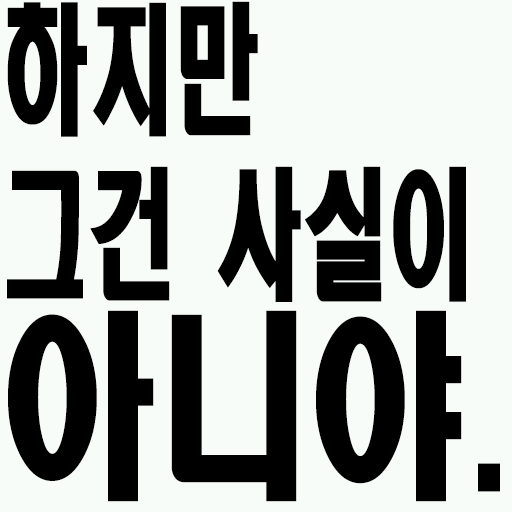
<style>
.page{position:relative;width:512px;height:512px;background:#f8fcf8}
.page>*{position:absolute;margin:0}
.t1{font:140.4px/165px "HeadlineR-HM";color:#000000;scale:0.61 1}
.t2{font:198px/165px "HeadlineR-HM";color:#000000;scale:0.78 1}
</style>
<div class="page">
<p class="t1" style="left:7px;top:1px;width:493px;height:501px">하지만<br>그건 사실이<br><span class="t2">아니야.</span></p>
</div>
